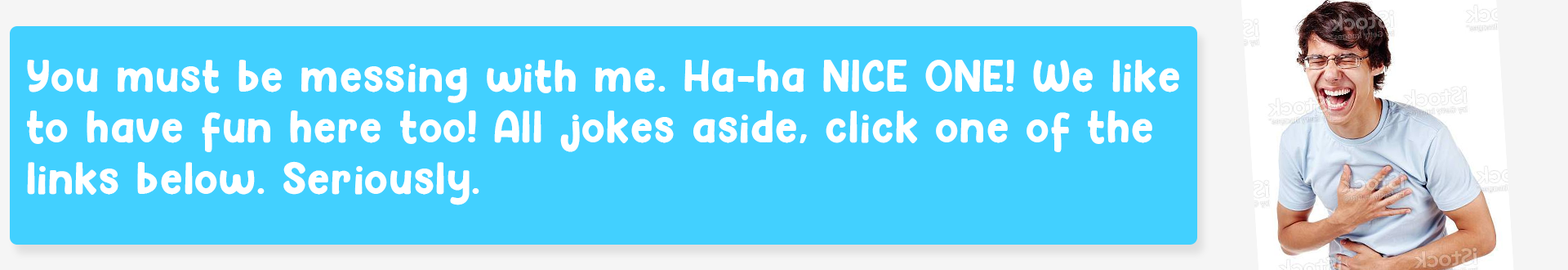
<style>
.page{position:relative;width:1568px;height:270px;background:#42d0ff}
.page>*{position:absolute;margin:0}
.t1{font:42.5px "Hey-Comic";letter-spacing:0.025em;color:#ffffff}
</style>
<div class="page">
<p class="t1" style="left:27px;top:60px;width:1152px;height:145px">You must be messing with me. Ha-ha NICE ONE! We like to have fun here too! All jokes aside, click one of the links below. Seriously.</p>
</div>
